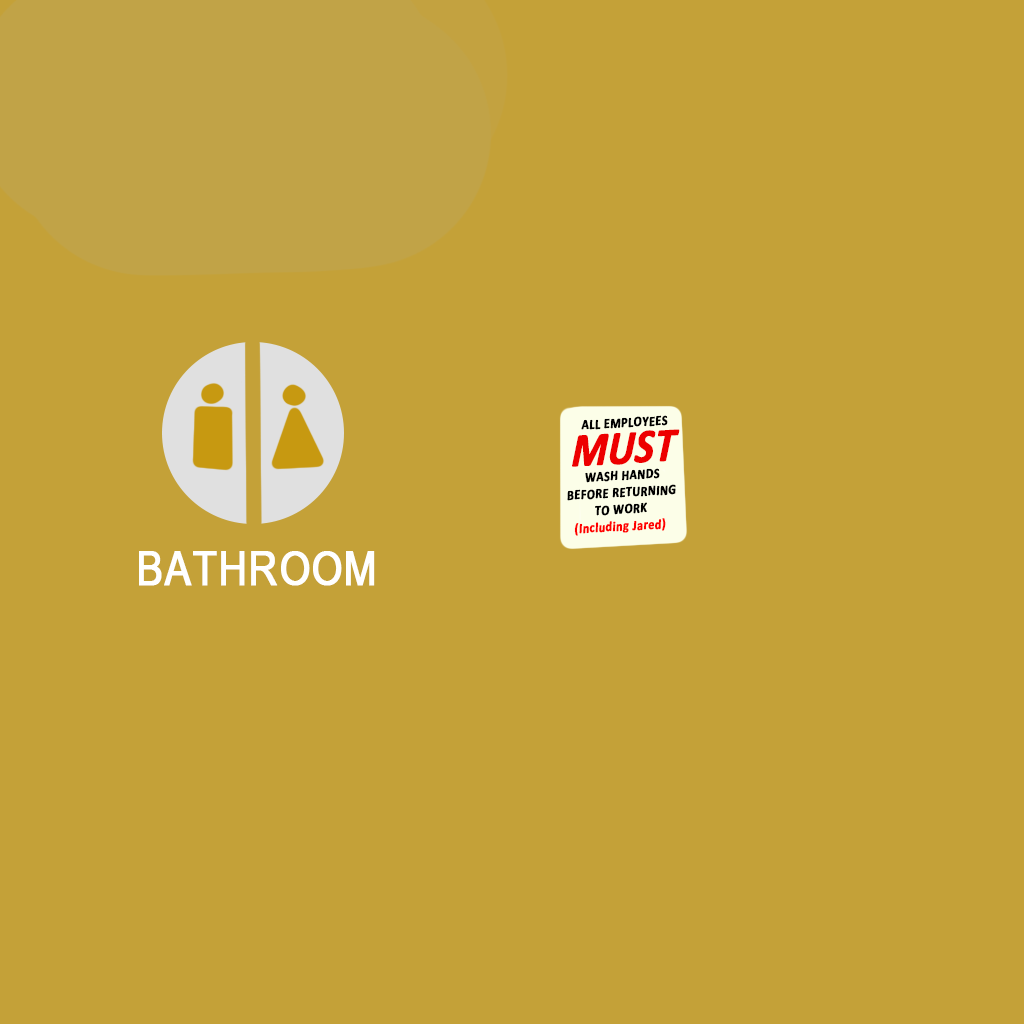
<style>
.page{position:relative;width:1024px;height:1024px;background:#c4a138}
.page>*{position:absolute;margin:0}
.t1{font:14.1px "Calibri-Bold";letter-spacing:0.025em;color:#000000;font-weight:bold;scale:0.84 1}
.t2{font:48px/36px "Calibri-BoldItalic";color:#ed0000;font-weight:bold;scale:0.84 1}
.t3{font:14.1px "Calibri-Bold";letter-spacing:0.025em;color:#ff0000;font-weight:bold;scale:0.84 1}
.t4{font:48px "ArialNarrow";letter-spacing:0.01em;color:#ffffff;font-weight:bold}
</style>
<div class="page">
<p class="t1" style="left:567px;top:415px;width:113px;height:121px;text-align:center;rotate:-3deg">ALL EMPLOYEES<br><span class="t2">MUST<br></span>WASH HANDS<br>BEFORE RETURNING<br>TO WORK<br><span class="t3">(Including Jared)</span></p>
<p class="t4" style="left:139px;top:551px;width:236px;height:35px">BATHROOM</p>
</div>
